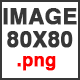
<style>
.page{position:relative;width:80px;height:80px;background:#ffffff}
.page>*{position:absolute;margin:0}
.t1{font:22px/23.3px "Helvetica-Bold";color:#373737;font-weight:bold}
.t2{font:18px "Helvetica-Bold";color:#ff0000;font-weight:bold}
</style>
<div class="page">
<p class="t1" style="left:3px;top:8px;width:74px;height:40px;text-align:center">IMAGE<br>80X80</p>
<p class="t2" style="left:17px;top:56px;width:39px;height:15px">.png</p>
</div>
